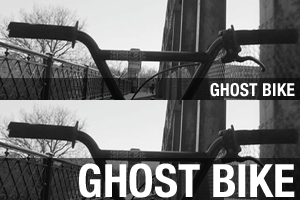
<style>
.page{position:relative;width:300px;height:200px}
.page>*{position:absolute;margin:0}
.t1{font:18px "HelveticaNeue-CondensedBold";color:#ffffff;text-transform:uppercase}
.t2{font:46px "HelveticaNeue-CondensedBold";color:#ffffff;text-transform:uppercase}
</style>
<div class="page">
<p class="t1" style="left:210px;top:83px;width:85px;height:14px">Ghost bike</p>
<p class="t2" style="left:79px;top:163px;width:216px;height:35px">ghost bike</p>
</div>
